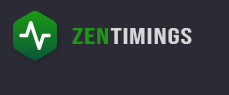
<style>
.page{position:relative;width:229px;height:95px;background:#2a2b34}
.page>*{position:absolute;margin:0}
.t1{font:21.8px "BebasNeue-Regular";letter-spacing:0.025em;color:#d6d6d6;scale:1.43 1}
.t2{font:21.8px "BebasNeue-Regular";letter-spacing:0.025em;color:#1c9614;scale:1.43 1}
</style>
<div class="page">
<p class="t1" style="left:72px;top:28px;width:120px;height:16px"><span class="t2">ZEN</span>TIMINGS</p>
</div>
